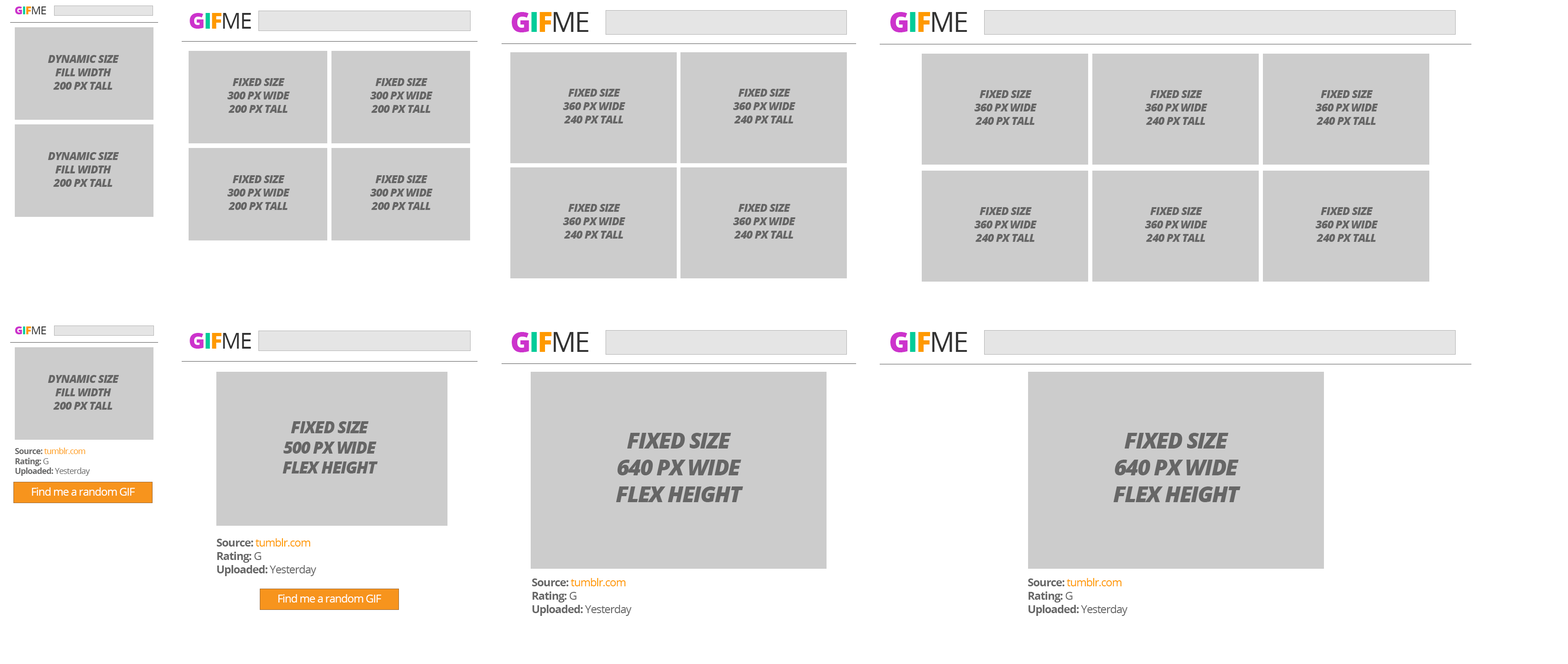
<style>
.page{position:relative;width:1568px;height:664px;background:#ffffff}
.page>*{position:absolute;margin:0}
.t1{font:11.1px "OpenSans";letter-spacing:-0.05em;color:#333333}
.t2{font:11.1px "OpenSans-Extrabold";letter-spacing:-0.05em;color:#cc33cc}
.t3{font:11.1px "OpenSans-Extrabold";letter-spacing:-0.05em;color:#00cc99}
.t4{font:11.1px "OpenSans-Extrabold";letter-spacing:-0.05em;color:#ff9900}
.t5{font:22.2px "OpenSans";letter-spacing:-0.05em;color:#333333}
.t6{font:22.2px "OpenSans-Extrabold";letter-spacing:-0.05em;color:#cc33cc}
.t7{font:22.2px "OpenSans-Extrabold";letter-spacing:-0.05em;color:#00cc99}
.t8{font:22.2px "OpenSans-Extrabold";letter-spacing:-0.05em;color:#ff9900}
.t9{font:27.7px "OpenSans";letter-spacing:-0.05em;color:#333333}
.t10{font:27.7px "OpenSans-Extrabold";letter-spacing:-0.05em;color:#cc33cc}
.t11{font:27.7px "OpenSans-Extrabold";letter-spacing:-0.05em;color:#00cc99}
.t12{font:27.7px "OpenSans-Extrabold";letter-spacing:-0.05em;color:#ff9900}
.t13{font:11.1px "OpenSans-ExtraboldItalic";letter-spacing:-0.05em;color:#666666}
.t14{font:16.6px "OpenSans-ExtraboldItalic";letter-spacing:-0.05em;color:#666666}
.t15{font:22.2px "OpenSans-ExtraboldItalic";letter-spacing:-0.05em;color:#666666}
.t16{font:8.3px "OpenSans";letter-spacing:-0.05em;color:#ff9900}
.t17{font:8.3px "OpenSans-Bold";letter-spacing:-0.05em;color:#666666}
.t18{font:8.3px "OpenSans";letter-spacing:-0.05em;color:#666666}
.t19{font:11.1px "OpenSans";letter-spacing:-0.05em;color:#ffffff}
.t20{font:11.1px "OpenSans";letter-spacing:-0.05em;color:#ff9900}
.t21{font:11.1px "OpenSans-Bold";letter-spacing:-0.05em;color:#666666}
.t22{font:11.1px "OpenSans";letter-spacing:-0.05em;color:#666666}
</style>
<div class="page">
<p class="t1" style="left:15px;top:6px;width:31px;height:8px"><span class="t2">G</span><span class="t3">I</span><span class="t4">F</span>ME</p>
<p class="t5" style="left:190px;top:13px;width:61px;height:16px"><span class="t6">G</span><span class="t7">I</span><span class="t8">F</span>ME</p>
<p class="t9" style="left:512px;top:12px;width:76px;height:20px"><span class="t10">G</span><span class="t11">I</span><span class="t12">F</span>ME</p>
<p class="t9" style="left:890px;top:12px;width:77px;height:20px"><span class="t10">G</span><span class="t11">I</span><span class="t12">F</span>ME</p>
<p class="t13" style="left:48px;top:55px;width:71px;height:35px;text-align:center">DYNAMIC SIZE<br>FILL WIDTH<br>200 PX TALL</p>
<p class="t13" style="left:227px;top:78px;width:63px;height:35px;text-align:center">FIXED SIZE<br>300 PX WIDE<br>200 PX TALL</p>
<p class="t13" style="left:370px;top:78px;width:63px;height:35px;text-align:center">FIXED SIZE<br>300 PX WIDE<br>200 PX TALL</p>
<p class="t13" style="left:563px;top:89px;width:62px;height:34px;text-align:center">FIXED SIZE<br>360 PX WIDE<br>240 PX TALL</p>
<p class="t13" style="left:733px;top:89px;width:63px;height:34px;text-align:center">FIXED SIZE<br>360 PX WIDE<br>240 PX TALL</p>
<p class="t13" style="left:974px;top:90px;width:63px;height:35px;text-align:center">FIXED SIZE<br>360 PX WIDE<br>240 PX TALL</p>
<p class="t13" style="left:1145px;top:90px;width:62px;height:35px;text-align:center">FIXED SIZE<br>360 PX WIDE<br>240 PX TALL</p>
<p class="t13" style="left:1316px;top:90px;width:62px;height:35px;text-align:center">FIXED SIZE<br>360 PX WIDE<br>240 PX TALL</p>
<p class="t13" style="left:48px;top:152px;width:71px;height:35px;text-align:center">DYNAMIC SIZE<br>FILL WIDTH<br>200 PX TALL</p>
<p class="t13" style="left:227px;top:175px;width:63px;height:35px;text-align:center">FIXED SIZE<br>300 PX WIDE<br>200 PX TALL</p>
<p class="t13" style="left:370px;top:175px;width:63px;height:35px;text-align:center">FIXED SIZE<br>300 PX WIDE<br>200 PX TALL</p>
<p class="t13" style="left:563px;top:204px;width:62px;height:35px;text-align:center">FIXED SIZE<br>360 PX WIDE<br>240 PX TALL</p>
<p class="t13" style="left:733px;top:204px;width:63px;height:35px;text-align:center">FIXED SIZE<br>360 PX WIDE<br>240 PX TALL</p>
<p class="t13" style="left:974px;top:207px;width:63px;height:35px;text-align:center">FIXED SIZE<br>360 PX WIDE<br>240 PX TALL</p>
<p class="t13" style="left:1145px;top:207px;width:62px;height:35px;text-align:center">FIXED SIZE<br>360 PX WIDE<br>240 PX TALL</p>
<p class="t13" style="left:1316px;top:207px;width:62px;height:35px;text-align:center">FIXED SIZE<br>360 PX WIDE<br>240 PX TALL</p>
<p class="t1" style="left:15px;top:326px;width:31px;height:8px"><span class="t2">G</span><span class="t3">I</span><span class="t4">F</span>ME</p>
<p class="t5" style="left:190px;top:333px;width:61px;height:16px"><span class="t6">G</span><span class="t7">I</span><span class="t8">F</span>ME</p>
<p class="t9" style="left:512px;top:332px;width:76px;height:20px"><span class="t10">G</span><span class="t11">I</span><span class="t12">F</span>ME</p>
<p class="t9" style="left:890px;top:332px;width:77px;height:20px"><span class="t10">G</span><span class="t11">I</span><span class="t12">F</span>ME</p>
<p class="t13" style="left:48px;top:375px;width:71px;height:35px;text-align:center">DYNAMIC SIZE<br>FILL WIDTH<br>200 PX TALL</p>
<p class="t14" style="left:282px;top:421px;width:96px;height:52px;text-align:center">FIXED SIZE<br>500 PX WIDE<br>FLEX HEIGHT</p>
<p class="t15" style="left:616px;top:433px;width:127px;height:69px;text-align:center">FIXED SIZE<br>640 PX WIDE<br>FLEX HEIGHT</p>
<p class="t15" style="left:1113px;top:433px;width:128px;height:69px;text-align:center">FIXED SIZE<br>640 PX WIDE<br>FLEX HEIGHT</p>
<p class="t16" style="left:15px;top:447px;width:75px;height:29px"><span class="t17">Source: </span>tumblr.com<br><span class="t17">Rating: </span><span class="t18">G<br></span><span class="t17">Uploaded: </span><span class="t18">Yesterday</span></p>
<p class="t19" style="left:32px;top:487px;width:103px;height:9px">Find me a random GIF</p>
<p class="t20" style="left:217px;top:538px;width:99px;height:38px"><span class="t21">Source: </span>tumblr.com<br><span class="t21">Rating: </span><span class="t22">G<br></span><span class="t21">Uploaded: </span><span class="t22">Yesterday</span></p>
<p class="t20" style="left:532px;top:578px;width:99px;height:38px"><span class="t21">Source: </span>tumblr.com<br><span class="t21">Rating: </span><span class="t22">G<br></span><span class="t21">Uploaded: </span><span class="t22">Yesterday</span></p>
<p class="t20" style="left:1028px;top:578px;width:99px;height:38px"><span class="t21">Source: </span>tumblr.com<br><span class="t21">Rating: </span><span class="t22">G<br></span><span class="t21">Uploaded: </span><span class="t22">Yesterday</span></p>
<p class="t19" style="left:278px;top:594px;width:103px;height:8px">Find me a random GIF</p>
</div>
